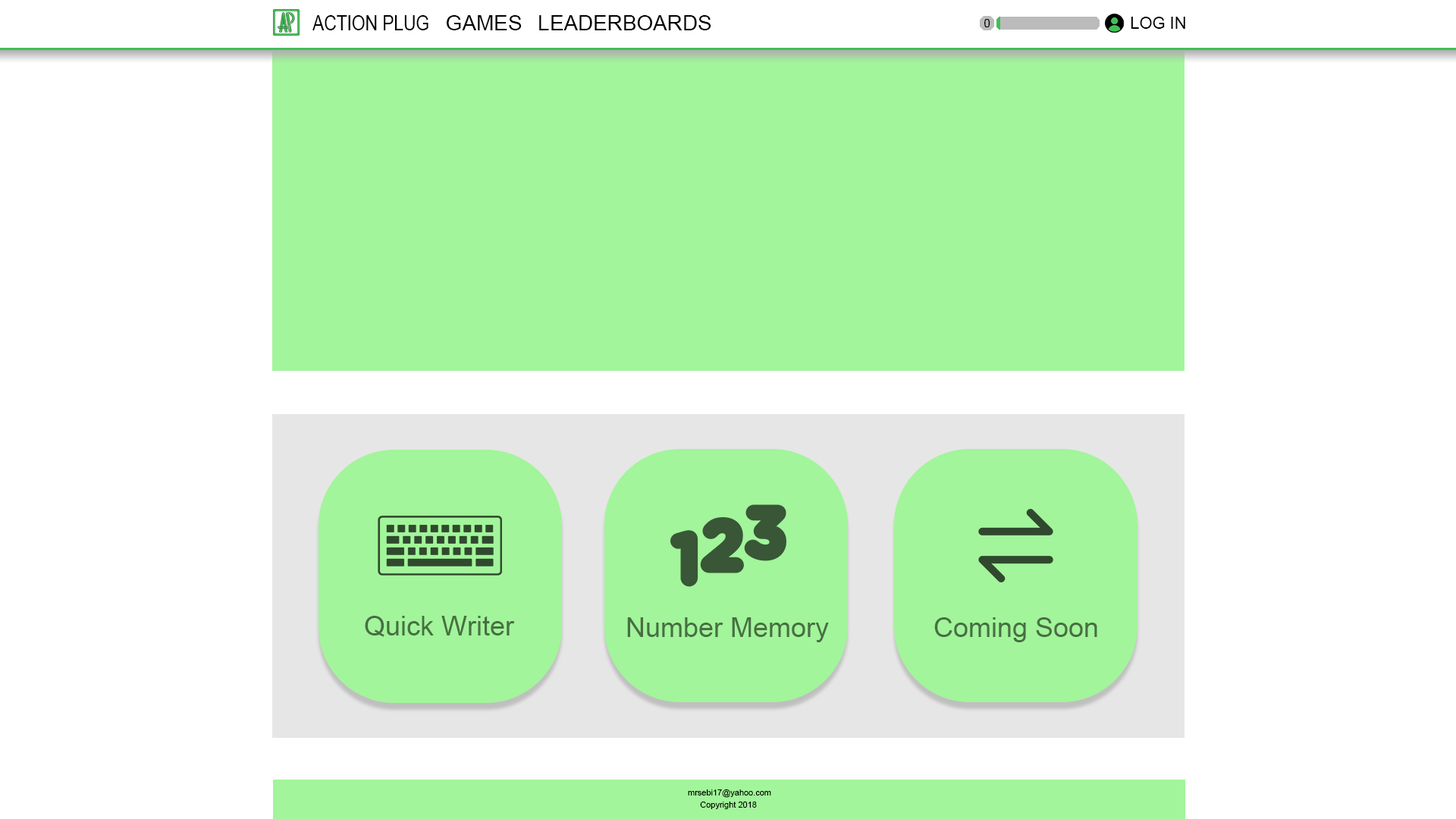
<style>
.page{position:relative;width:1456px;height:819px;background:#ffffff}
.page>*{position:absolute;margin:0}
.t1{font:21.3px "ArialMT";color:#000000;scale:0.81 1}
.t2{font:21.3px "ArialMT";color:#000000}
.t3{font:16.6px "ArialMT";color:#000000}
.t4{font:11.1px "ArialMT";color:#000000}
.t5{font:27.3px "ArialMT";color:#476f43}
.t6{font:8.5px "ArialMT";color:#000000}
.t7{font:8.3px "ArialMT";color:#000000}
</style>
<div class="page">
<p class="t1" style="left:312px;top:15px;width:116px;height:15px">ACTION PLUG</p>
<p class="t2" style="left:447px;top:15px;width:75px;height:15px">GAMES</p>
<p class="t2" style="left:539px;top:15px;width:172px;height:15px">LEADERBOARDS</p>
<p class="t3" style="left:1131px;top:17px;width:54px;height:12px">LOG IN</p>
<p class="t4" style="left:984px;top:19px;width:6px;height:8px">0</p>
<p class="t5" style="left:365px;top:616px;width:150px;height:21px">Quick Writer</p>
<p class="t5" style="left:627px;top:617px;width:202px;height:25px">Number Memory</p>
<p class="t5" style="left:934px;top:617px;width:163px;height:25px">Coming Soon</p>
<p class="t6" style="left:688px;top:789px;width:83px;height:9px">mrsebi17@yahoo.com</p>
<p class="t7" style="left:700px;top:802px;width:57px;height:7px">Copyright 2018</p>
</div>
